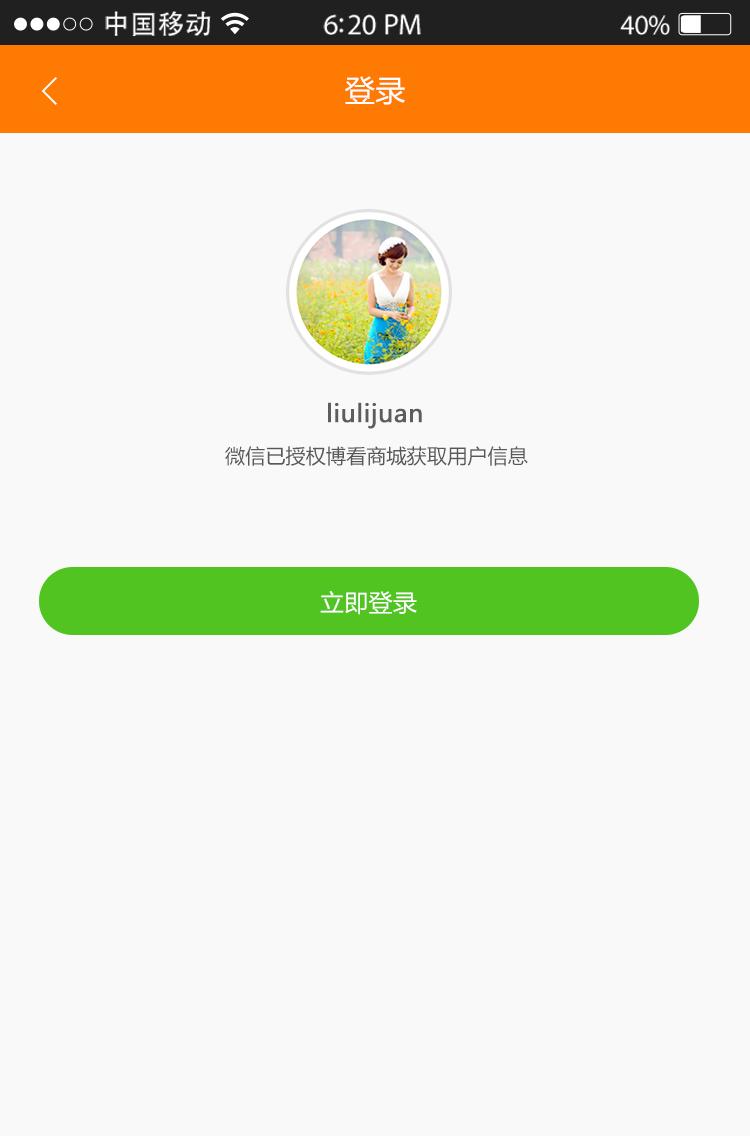
<style>
.page{position:relative;width:750px;height:1136px;background:#f9f9f9}
.page>*{position:absolute;margin:0}
.t1{font:27px "AdobeHeitiStd-Regular";letter-spacing:0.02em;color:#ffffff}
.t2{font:29.4px "MyriadPro-Regular";letter-spacing:-0.02em;color:#ffffff}
.t3{font:28.2px "MyriadPro-Regular";letter-spacing:-0.02em;color:#ffffff}
.t4{font:30px "MicrosoftYaHei";letter-spacing:0.01em;color:#ffffff}
.t5{font:24px "MicrosoftYaHei";letter-spacing:0.01em;color:#5d5d5d;font-weight:bold}
.t6{font:20px "MicrosoftYaHei";letter-spacing:0.01em;color:#585858}
.t7{font:24px "MicrosoftYaHei";letter-spacing:0.01em;color:#ffffff}
</style>
<div class="page">
<p class="t1" style="left:105px;top:11px;width:106px;height:25px">中国移动</p>
<p class="t2" style="left:323px;top:14px;width:98px;height:21px">6:20 PM</p>
<p class="t3" style="left:620px;top:15px;width:50px;height:20px">40%</p>
<p class="t4" style="left:345px;top:76px;width:60px;height:29px">登录</p>
<p class="t5" style="left:328px;top:402px;width:94px;height:27px">liulijuan</p>
<p class="t6" style="left:225px;top:446px;width:303px;height:20px">微信已授权博看商城获取用户信息</p>
<p class="t7" style="left:320px;top:590px;width:97px;height:25px">立即登录</p>
</div>
